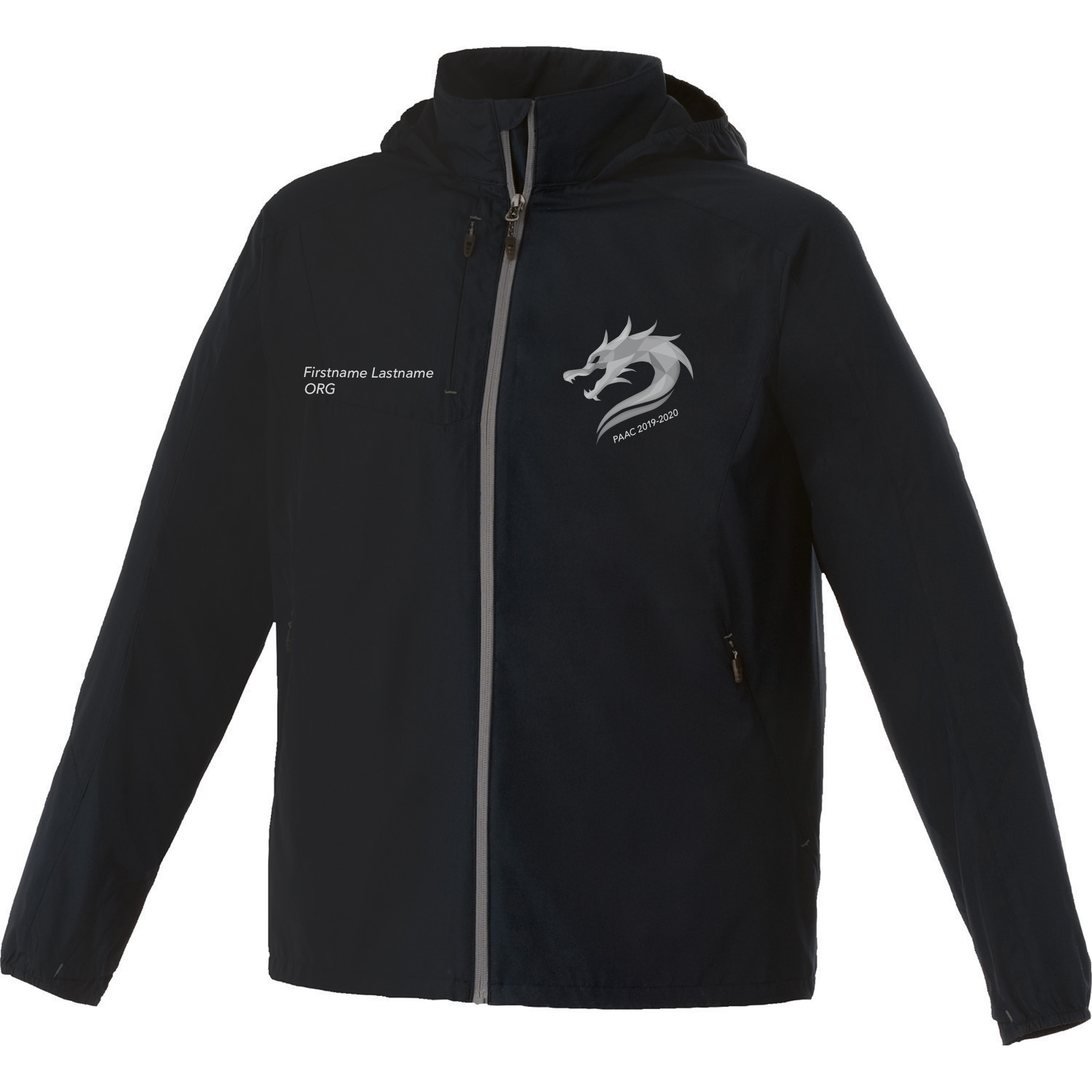
<style>
.page{position:relative;width:1092px;height:1092px;background:#ffffff}
.page>*{position:absolute;margin:0}
.t1{font:14.4px "AvenirNext-MediumItalic";color:#d3d4d4}
.t2{font:14.4px "AvenirNext-MediumItalic";color:#d3d3d4}
.t3{font:9.2px "AvenirNext-MediumItalic";color:#d3d3d3}
</style>
<div class="page">
<p class="t1" style="left:303px;top:367px;width:130px;height:11px">Firstname Lastname</p>
<p class="t2" style="left:305px;top:383px;width:30px;height:11px">ORG</p>
<p class="t3" style="left:613px;top:409px;width:65px;height:34px;rotate:-24deg">PAAC 2019-2020</p>
</div>
